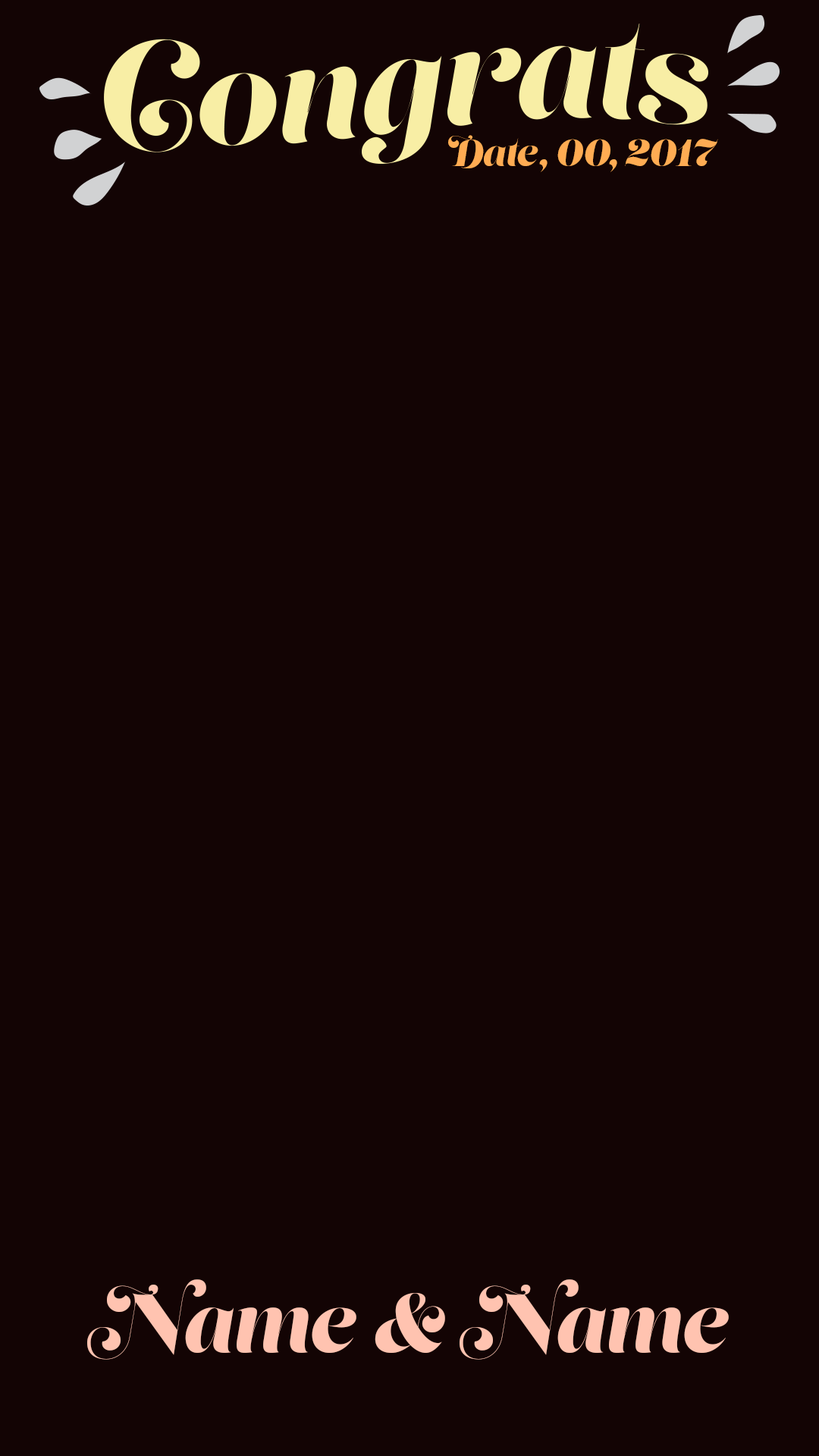
<style>
.page{position:relative;width:819px;height:1456px;background:#130404}
.page>*{position:absolute;margin:0}
.t1{font:37.9px "LustScriptDisplay";color:#ffac53}
.t2{font:83.4px "LustScriptDisplay";color:#ffc3b0}
</style>
<div class="page">
<p class="t1" style="left:448px;top:135px;width:270px;height:37px">Date, 00, 2017</p>
<p class="t2" style="left:87px;top:1279px;width:642px;height:81px">Name &amp; Name</p>
</div>
